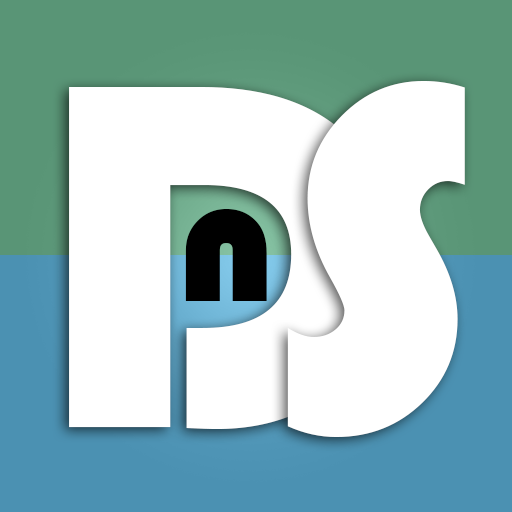
<style>
.page{position:relative;width:512px;height:512px;background:#ffffff}
.page>*{position:absolute;margin:0}
.t1{font:510px "Bauhaus93";color:#ffffff}
.t2{font:185.8px "Bauhaus93";color:#000000}
</style>
<div class="page">
<p class="t1" style="left:69px;top:87px;width:326px;height:342px">D</p>
<p class="t1" style="left:287px;top:81px;width:178px;height:356px">S</p>
<p class="t2" style="left:185px;top:209px;width:82px;height:92px">n</p>
</div>
